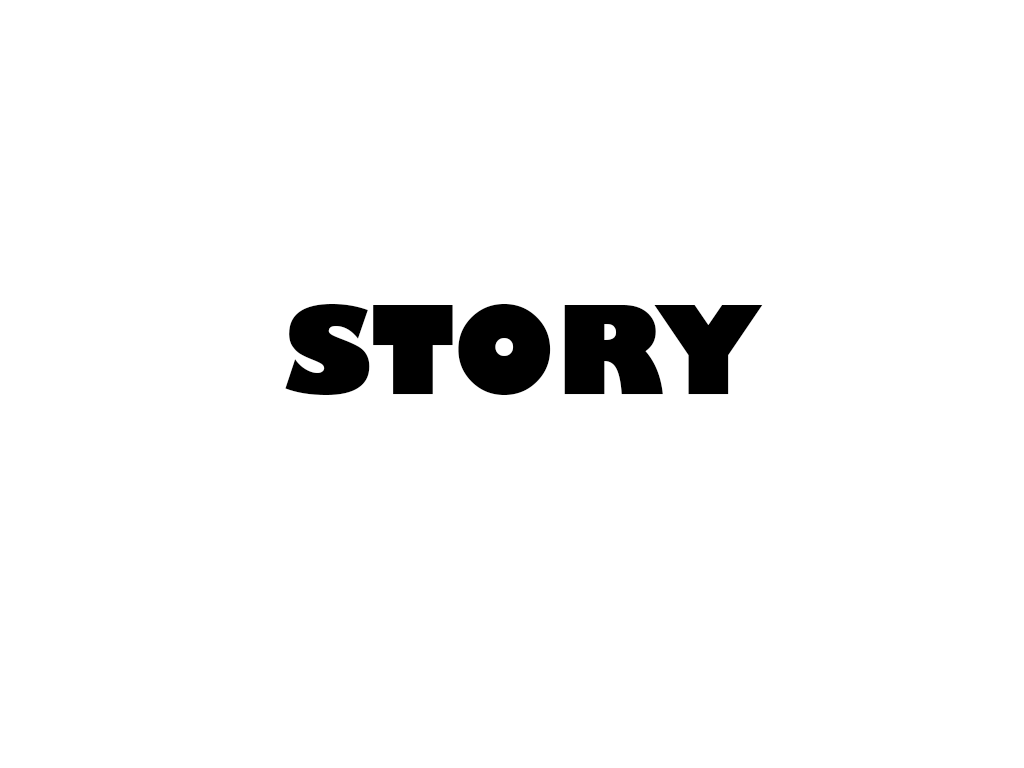
<style>
.page{position:relative;width:1024px;height:768px;background:#ffffff}
.page>*{position:absolute;margin:0}
.t1{font:120px "GillSans-UltraBold";color:#000000}
</style>
<div class="page">
<p class="t1" style="left:285px;top:304px;width:478px;height:91px">STORY</p>
</div>
